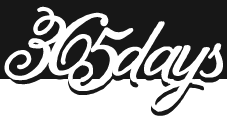
<style>
.page{position:relative;width:227px;height:119px;background:#171717}
.page>*{position:absolute;margin:0}
.t1{font:125px "MelanyLane-Bold";letter-spacing:-0.025em;color:#ffffff}
.t2{font:125px "MelanyLane-Bold";letter-spacing:-0.025em;color:#fefefe}
.t3{font:104.2px "MelanyLane-Bold";letter-spacing:-0.025em;color:#ffffff}
</style>
<div class="page">
<p class="t1" style="left:4px;top:6px;width:62px;height:75px">3</p>
<p class="t1" style="left:48px;top:12px;width:61px;height:64px">6</p>
<p class="t2" style="left:68px;top:27px;width:66px;height:64px">5</p>
<p class="t3" style="left:112px;top:21px;width:111px;height:90px">days</p>
</div>
